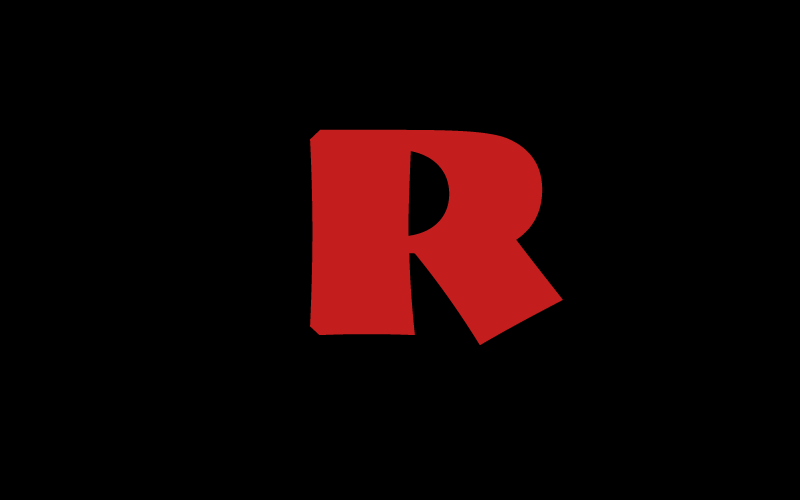
<style>
.page{position:relative;width:800px;height:500px;background:#000000}
.page>*{position:absolute;margin:0}
.t1{font:300px "BremenBT-Black";letter-spacing:0.025em;color:#c31d1d}
</style>
<div class="page">
<p class="t1" style="left:310px;top:129px;width:253px;height:216px">R</p>
</div>
